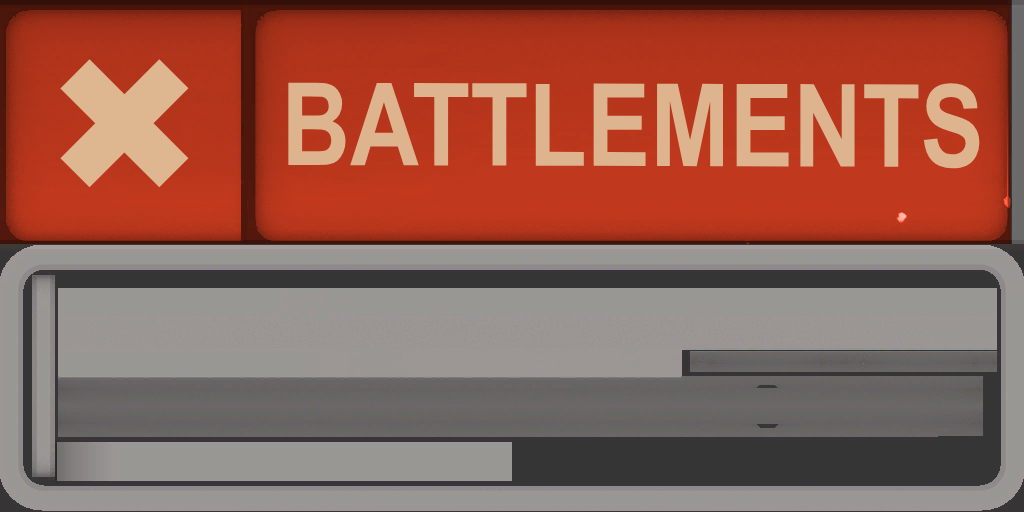
<style>
.page{position:relative;width:1024px;height:512px}
.page>*{position:absolute;margin:0}
.t1{font:192px "DejaVuSans";color:#deb791}
.t2{font:115px "Arial-BoldMT";color:#deb48e;scale:0.83 1}
.t3{font:115px "Arial-BoldMT";color:#deb791;scale:0.83 1}
</style>
<div class="page">
<p class="t1" style="left:60px;top:59px;width:129px;height:129px">✖</p>
<p class="t2" style="left:288px;top:82px;width:692px;height:87px">BATTLEMENTS</p>
<p class="t3" style="left:288px;top:82px;width:692px;height:87px">BATTLEMENTS</p>
<p class="t2" style="left:288px;top:82px;width:692px;height:87px">BATTLEMENTS</p>
</div>
